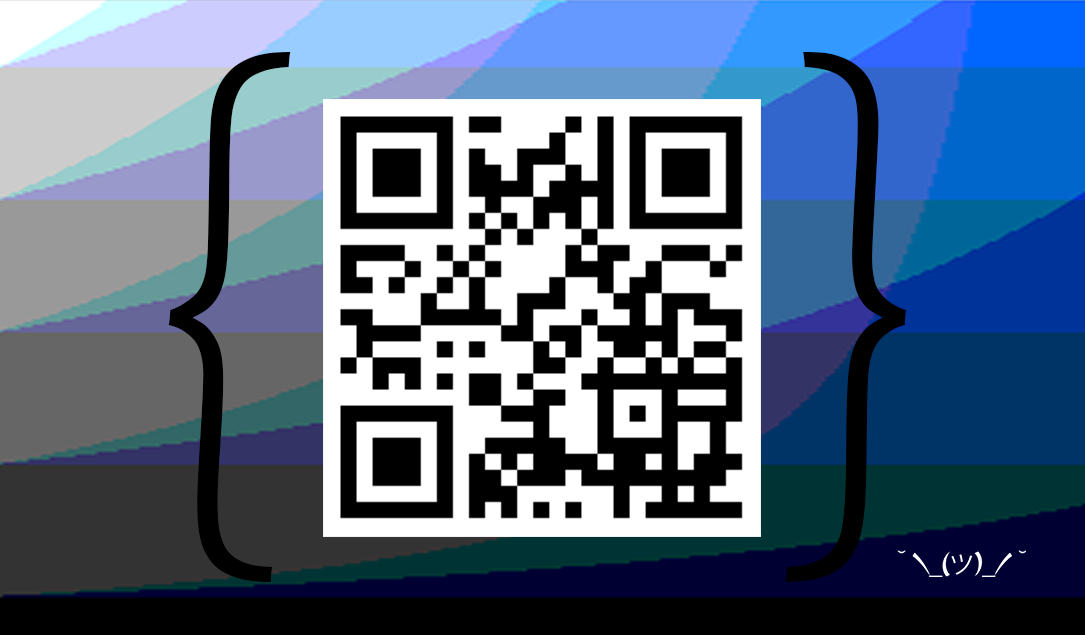
<style>
.page{position:relative;width:1085px;height:635px;background:#000000}
.page>*{position:absolute;margin:0}
.t1{font:600px "ErasITC-Light";color:#000000}
</style>
<div class="page">
<p class="t1" style="left:168px;top:52px;width:123px;height:530px">{</p>
<p class="t1" style="left:785px;top:52px;width:122px;height:530px">}</p>
</div>
